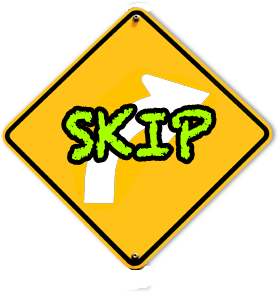
<style>
.page{position:relative;width:279px;height:292px;background:#ffffff}
.page>*{position:absolute;margin:0}
.t1{font:60px "Chalkduster";color:#a8ff00}
</style>
<div class="page">
<p class="t1" style="left:66px;top:108px;width:146px;height:52px">SKIP</p>
</div>
